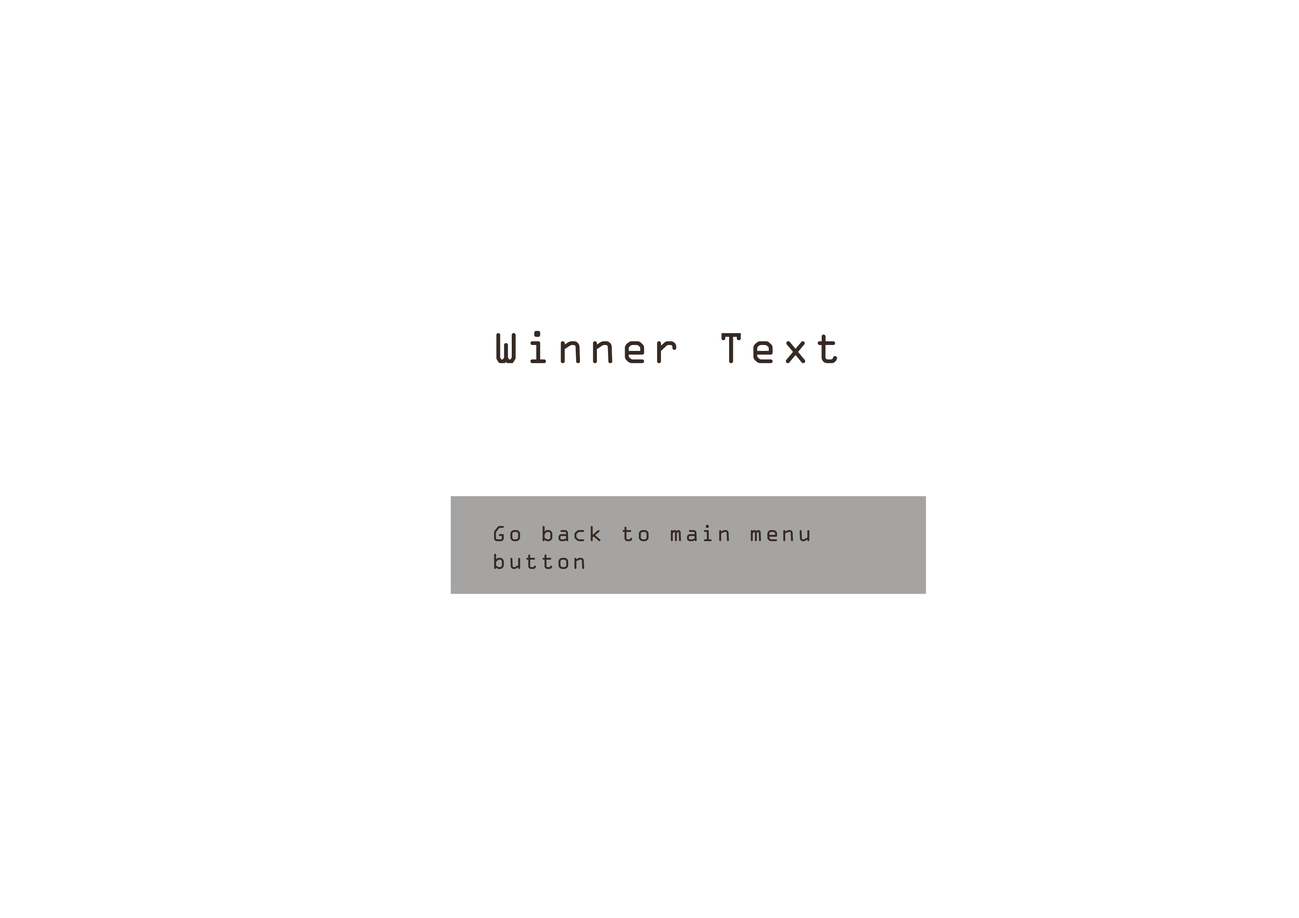
<style>
.page{position:relative;width:1299px;height:918px;background:#ffffff}
.page>*{position:absolute;margin:0}
.t1{font:46.3px "OCRAExtended";letter-spacing:0.09em;color:#362a24}
.t2{font:23.1px "OCRAExtended";letter-spacing:0.09em;color:#362a24}
</style>
<div class="page">
<p class="t1" style="left:496px;top:331px;width:341px;height:32px">Winner Text</p>
<p class="t2" style="left:494px;top:525px;width:315px;height:44px">Go back to main menu button</p>
</div>
